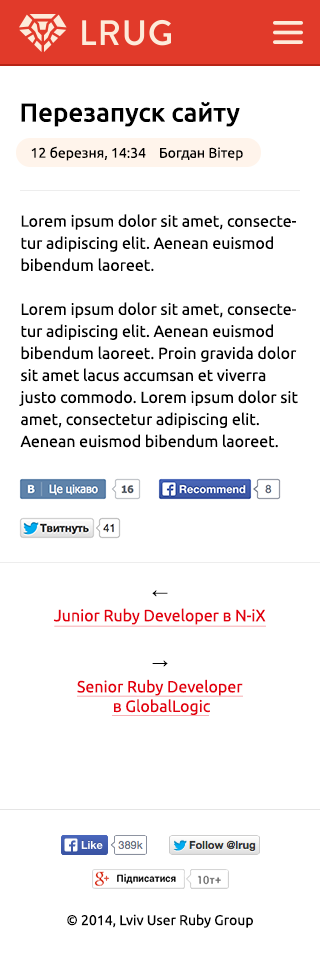
<style>
.page{position:relative;width:320px;height:955px;background:#ffffff}
.page>*{position:absolute;margin:0}
.t1{font:26px "Ubuntu-Medium";color:#000000}
.t2{font:14px "Ubuntu";color:#000000}
.t3{font:16px/22px "Ubuntu";color:#000000}
.t4{font:16.1px "ArialMT";color:#000000}
.t5{font:16.4px "Ubuntu";color:#e3000e}
.t6{font:16.2px "Ubuntu";color:#e3000e}
</style>
<div class="page">
<p class="t1" style="left:21px;top:101px;width:219px;height:26px">Перезапуск сайту</p>
<p class="t2" style="left:31px;top:146px;width:212px;height:15px">12 березня, 14:34    Богдан Вітер</p>
<p class="t3" style="left:19px;top:214px;width:279px;height:234px">Lorem ipsum dolor sit amet, consectetur adipiscing elit. Aenean euismod bibendum laoreet. <br><br>Lorem ipsum dolor sit amet, consectetur adipiscing elit. Aenean euismod bibendum laoreet. Proin gravida dolor sit amet lacus accumsan et viverra justo commodo. Lorem ipsum dolor sit amet, consectetur adipiscing elit. Aenean euismod bibendum laoreet. Proin gravida dolor sit amet lacus accumsan et viverra justo commodo.</p>
<p class="t4" style="left:152px;top:590px;width:16px;height:7px">←</p>
<p class="t5" style="left:53px;top:608px;width:213px;height:17px">Junior Ruby Developer в N-iX</p>
<p class="t4" style="left:152px;top:660px;width:16px;height:7px">→</p>
<p class="t6" style="left:77px;top:679px;width:166px;height:36px;text-align:center">Senior Ruby Developer <br>в GlobalLogic</p>
<p class="t2" style="left:67px;top:914px;width:186px;height:14px">© 2014, Lviv User Ruby Group</p>
</div>
